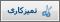
<style>
.page{position:relative;width:60px;height:22px}
.page>*{position:absolute;margin:0}
.t1{font:8px "Tahoma";color:#0f5486}
</style>
<div class="page">
<p class="t1" style="left:7px;top:6px;width:30px;height:9px">تمیزکاری</p>
</div>
